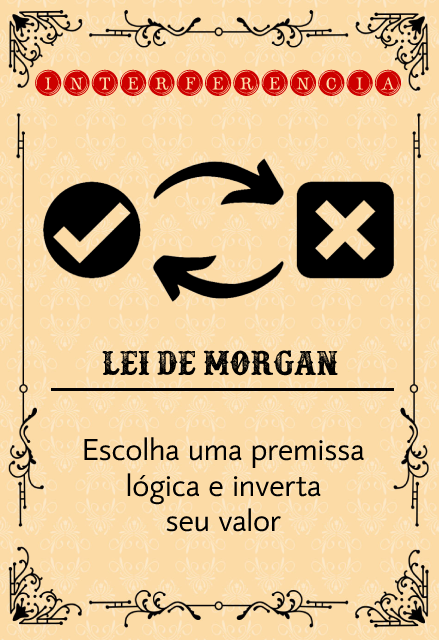
<style>
.page{position:relative;width:439px;height:640px;background:#fcdba6}
.page>*{position:absolute;margin:0}
.t1{font:35px "TypeKeysFilled";color:#cd0000}
.t2{font:38.4px "Docktrin";color:#000000}
.t3{font:29.5px "mirror82";color:#000000}
</style>
<div class="page">
<p class="t1" style="left:35px;top:69px;width:367px;height:27px">interferencia</p>
<p class="t2" style="left:102px;top:350px;width:236px;height:26px">Lei de morgan</p>
<p class="t3" style="left:84px;top:437px;width:280px;height:95px;text-align:center">Escolha uma premissa<br>lógica e inverta<br>seu valor</p>
</div>
